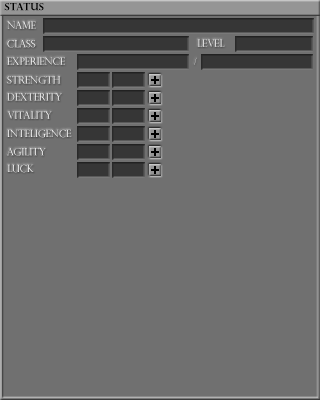
<style>
.page{position:relative;width:320px;height:400px;background:#707070}
.page>*{position:absolute;margin:0}
.t1{font:10px "PerpetuaTitlingMT-Bold";color:#000000}
.t2{font:10px "PerpetuaTitlingMT-Light"}
.t3{font:10px "PerpetuaTitlingMT-Light";color:#fefefe}
</style>
<div class="page">
<p class="t1" style="left:4px;top:3px;width:40px;height:8px">Status</p>
<p class="t2" style="left:7px;top:21px;width:29px;height:8px">Name</p>
<p class="t2" style="left:7px;top:40px;width:29px;height:8px">Class</p>
<p class="t2" style="left:197px;top:39px;width:28px;height:8px">level</p>
<p class="t2" style="left:7px;top:57px;width:58px;height:8px">Experience</p>
<p class="t2" style="left:194px;top:57px;width:3px;height:8px">/</p>
<p class="t2" style="left:7px;top:76px;width:54px;height:8px">Strength</p>
<p class="t2" style="left:7px;top:93px;width:55px;height:8px">Dexterity</p>
<p class="t2" style="left:7px;top:111px;width:45px;height:8px">Vitality</p>
<p class="t3" style="left:7px;top:129px;width:65px;height:9px">Inteligence</p>
<p class="t3" style="left:7px;top:147px;width:39px;height:9px">Agility</p>
<p class="t3" style="left:7px;top:164px;width:27px;height:9px">luck</p>
</div>
